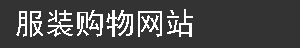
<style>
.page{position:relative;width:300px;height:48px;background:#333333}
.page>*{position:absolute;margin:0}
.t1{font:30px "SimHei";color:#ffffff}
</style>
<div class="page">
<p class="t1" style="left:16px;top:9px;width:177px;height:28px">服装购物网站</p>
</div>
